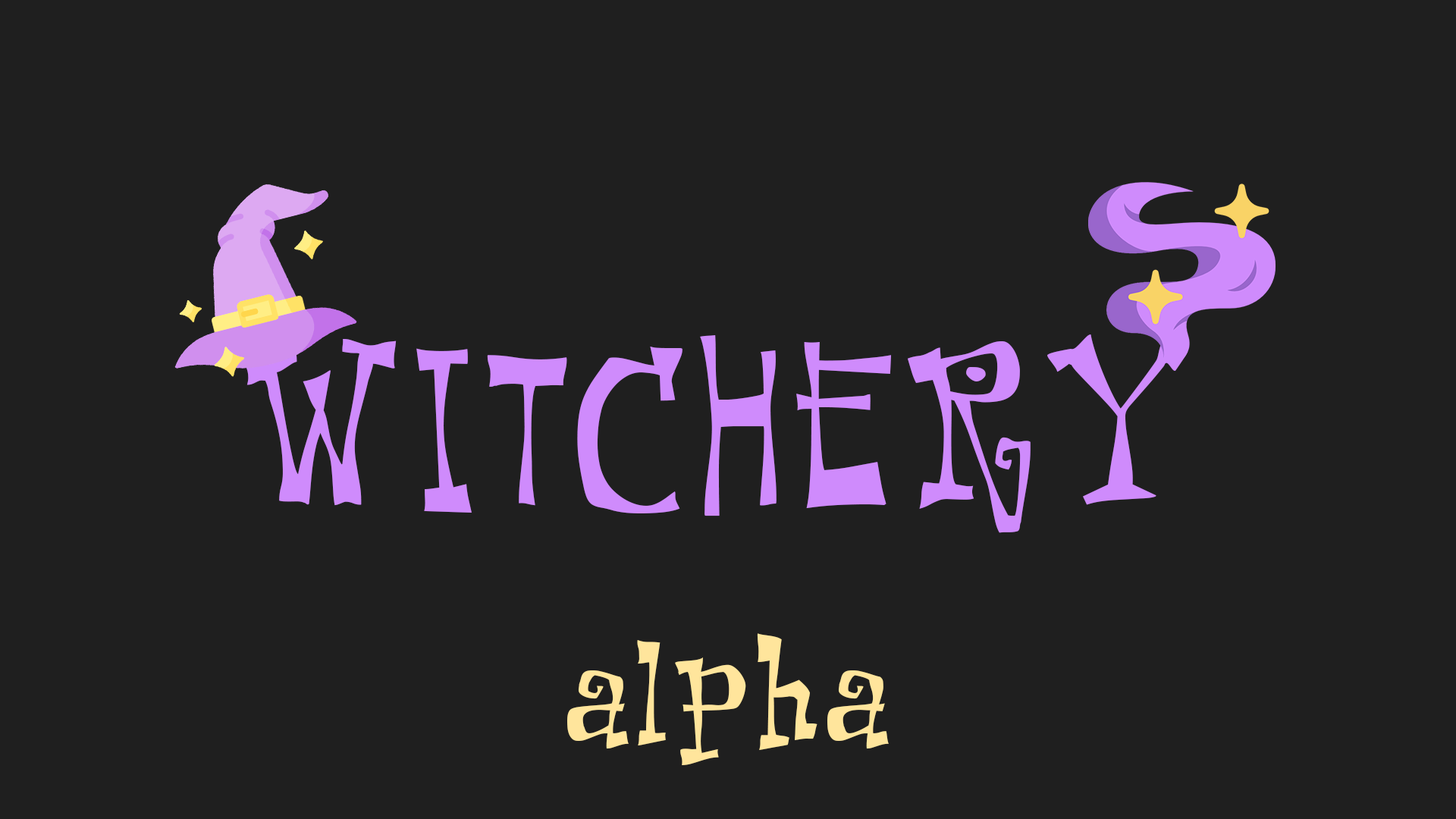
<style>
.page{position:relative;width:1456px;height:819px;background:#1f1f1f}
.page>*{position:absolute;margin:0}
.t1{font:227.5px "KotLeopold";letter-spacing:0.05em;color:#cf8bfc}
.t2{font:151.7px "KotLeopold";letter-spacing:0.05em;color:#ffe59c}
</style>
<div class="page">
<p class="t1" style="left:242px;top:334px;width:946px;height:199px">WITCHERY</p>
<p class="t2" style="left:567px;top:633px;width:322px;height:132px">alpha</p>
</div>
